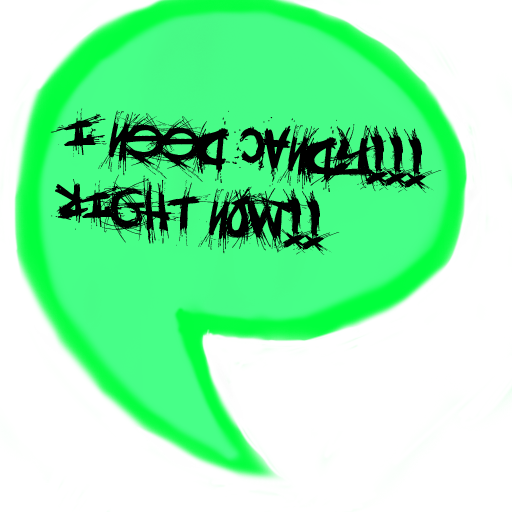
<style>
.page{position:relative;width:512px;height:512px;background:#ffffff}
.page>*{position:absolute;margin:0}
.t1{font:58.3px "el&fontgohtic!";color:#000000}
</style>
<div class="page">
<p class="t1" style="left:50px;top:108px;width:392px;height:147px;rotate:5deg">I NEED CANDY!!!<br>RIGHT NOW!!</p>
</div>
